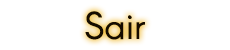
<style>
.page{position:relative;width:230px;height:50px;background:#ffffff}
.page>*{position:absolute;margin:0}
.t1{font:38px "Arcon-Regular";color:#160c00}
</style>
<div class="page">
<p class="t1" style="left:85px;top:11px;width:60px;height:29px">Sair</p>
</div>
